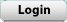
<style>
.page{position:relative;width:67px;height:22px}
.page>*{position:absolute;margin:0}
.t1{font:13px "MyriadPro-Bold";color:#000000}
</style>
<div class="page">
<p class="t1" style="left:18px;top:4px;width:32px;height:13px">Login</p>
</div>
